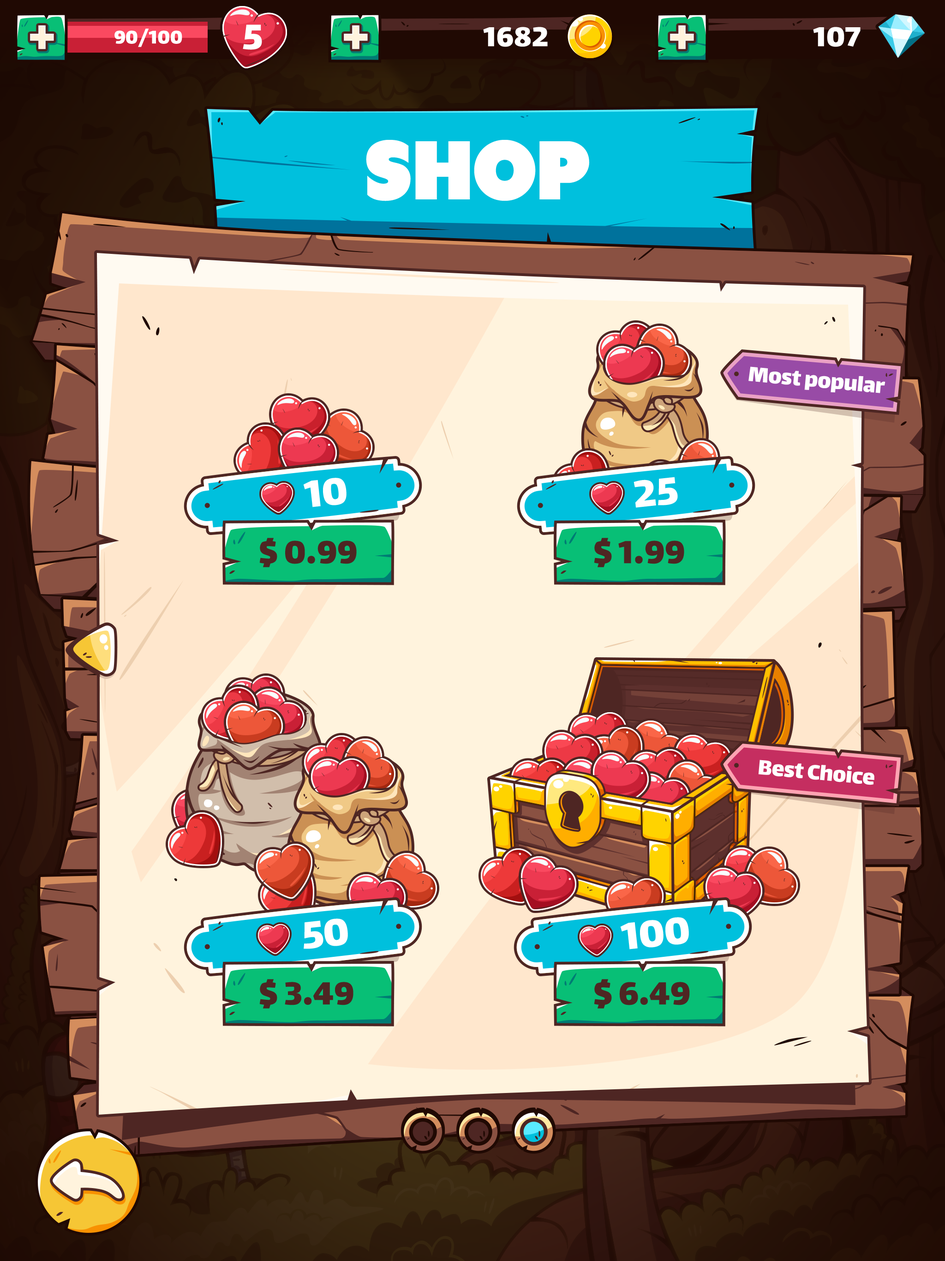
<style>
.page{position:relative;width:945px;height:1261px}
.page>*{position:absolute;margin:0}
.t1{font:57.2px "Lalezar-Regular";color:#fff3dd}
.t2{font:22.2px "Lalezar-Regular";color:#ffffff}
.t3{font:42.5px "Lalezar-Regular";color:#ffffff}
.t4{font:33.2px "Lalezar-Regular";color:#ffffff}
.t5{font:83.1px "Tondu-Beta";color:#ffffff;text-transform:uppercase}
.t6{font:24.9px "Lalezar-Regular";color:#ffffff}
.t7{font:46.2px "Lalezar-Regular";color:#ffffff}
.t8{font:38.8px "Lalezar-Regular";color:#4e2623}
</style>
<div class="page">
<p class="t1" style="left:30px;top:25px;width:24px;height:24px">+</p>
<p class="t2" style="left:114px;top:29px;width:68px;height:18px">90/100</p>
<p class="t3" style="left:243px;top:24px;width:19px;height:26px">5</p>
<p class="t1" style="left:344px;top:25px;width:24px;height:24px">+</p>
<p class="t4" style="left:483px;top:27px;width:65px;height:20px">1682</p>
<p class="t1" style="left:670px;top:25px;width:24px;height:24px">+</p>
<p class="t4" style="left:813px;top:27px;width:48px;height:20px">107</p>
<p class="t5" style="left:366px;top:140px;width:224px;height:61px">shop</p>
<p class="t6" style="left:749px;top:367px;width:137px;height:26px;rotate:5deg">Most popular</p>
<p class="t7" style="left:303px;top:478px;width:44px;height:29px;rotate:-6deg">10</p>
<p class="t7" style="left:634px;top:477px;width:44px;height:31px;rotate:-6deg">25</p>
<p class="t8" style="left:259px;top:538px;width:98px;height:29px">$ 0.99</p>
<p class="t8" style="left:594px;top:538px;width:91px;height:29px">$ 1.99</p>
<p class="t6" style="left:758px;top:760px;width:117px;height:25px;rotate:5deg">Best Choice</p>
<p class="t7" style="left:620px;top:917px;width:69px;height:33px;rotate:-6deg">100</p>
<p class="t7" style="left:304px;top:919px;width:44px;height:30px;rotate:-6deg">50</p>
<p class="t8" style="left:259px;top:979px;width:95px;height:30px">$ 3.49</p>
<p class="t8" style="left:594px;top:979px;width:96px;height:30px">$ 6.49</p>
</div>
